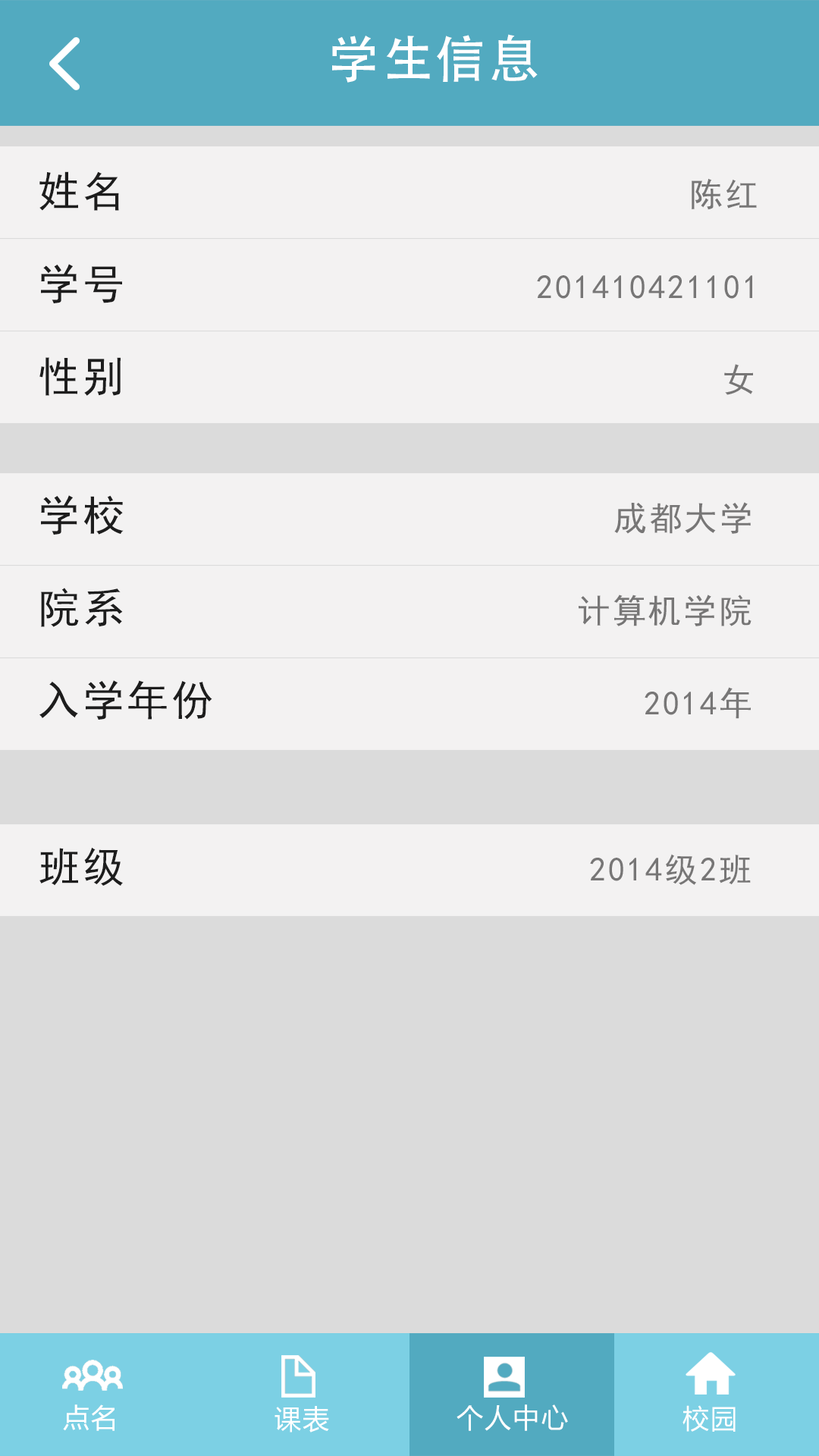
<style>
.page{position:relative;width:819px;height:1456px;background:#f3f2f2}
.page>*{position:absolute;margin:0}
.t1{font:50.8px "AdobeHeitiStd-Regular";letter-spacing:0.06em;color:#ffffff}
.t2{font:41.8px "SimHei";letter-spacing:0.06em;color:#1d1d1d}
.t3{font:33.5px "SimHei";letter-spacing:0.06em;color:#777676}
.t4{font:26.9px "MicrosoftYaHei";letter-spacing:0.06em;color:#ffffff}
</style>
<div class="page">
<p class="t1" style="left:332px;top:34px;width:206px;height:49px">学生信息</p>
<p class="t2" style="left:39px;top:171px;width:80px;height:40px">姓名</p>
<p class="t3" style="left:692px;top:178px;width:65px;height:32px">陈红</p>
<p class="t2" style="left:41px;top:264px;width:81px;height:39px">学号</p>
<p class="t3" style="left:537px;top:275px;width:215px;height:24px">201410421101</p>
<p class="t2" style="left:39px;top:357px;width:82px;height:39px">性别</p>
<p class="t3" style="left:724px;top:364px;width:29px;height:31px">女</p>
<p class="t2" style="left:41px;top:495px;width:83px;height:40px">学校</p>
<p class="t3" style="left:614px;top:502px;width:137px;height:32px">成都大学</p>
<p class="t2" style="left:41px;top:588px;width:82px;height:39px">院系</p>
<p class="t3" style="left:579px;top:595px;width:172px;height:31px">计算机学院</p>
<p class="t2" style="left:39px;top:680px;width:173px;height:40px">入学年份</p>
<p class="t3" style="left:645px;top:687px;width:106px;height:32px">2014年</p>
<p class="t2" style="left:39px;top:847px;width:84px;height:39px">班级</p>
<p class="t3" style="left:590px;top:854px;width:161px;height:31px">2014级2班</p>
<p class="t4" style="left:63px;top:1404px;width:52px;height:27px">点名</p>
<p class="t4" style="left:275px;top:1406px;width:54px;height:26px">课表</p>
<p class="t4" style="left:457px;top:1404px;width:111px;height:27px">个人中心</p>
<p class="t4" style="left:682px;top:1405px;width:54px;height:27px">校园</p>
</div>
